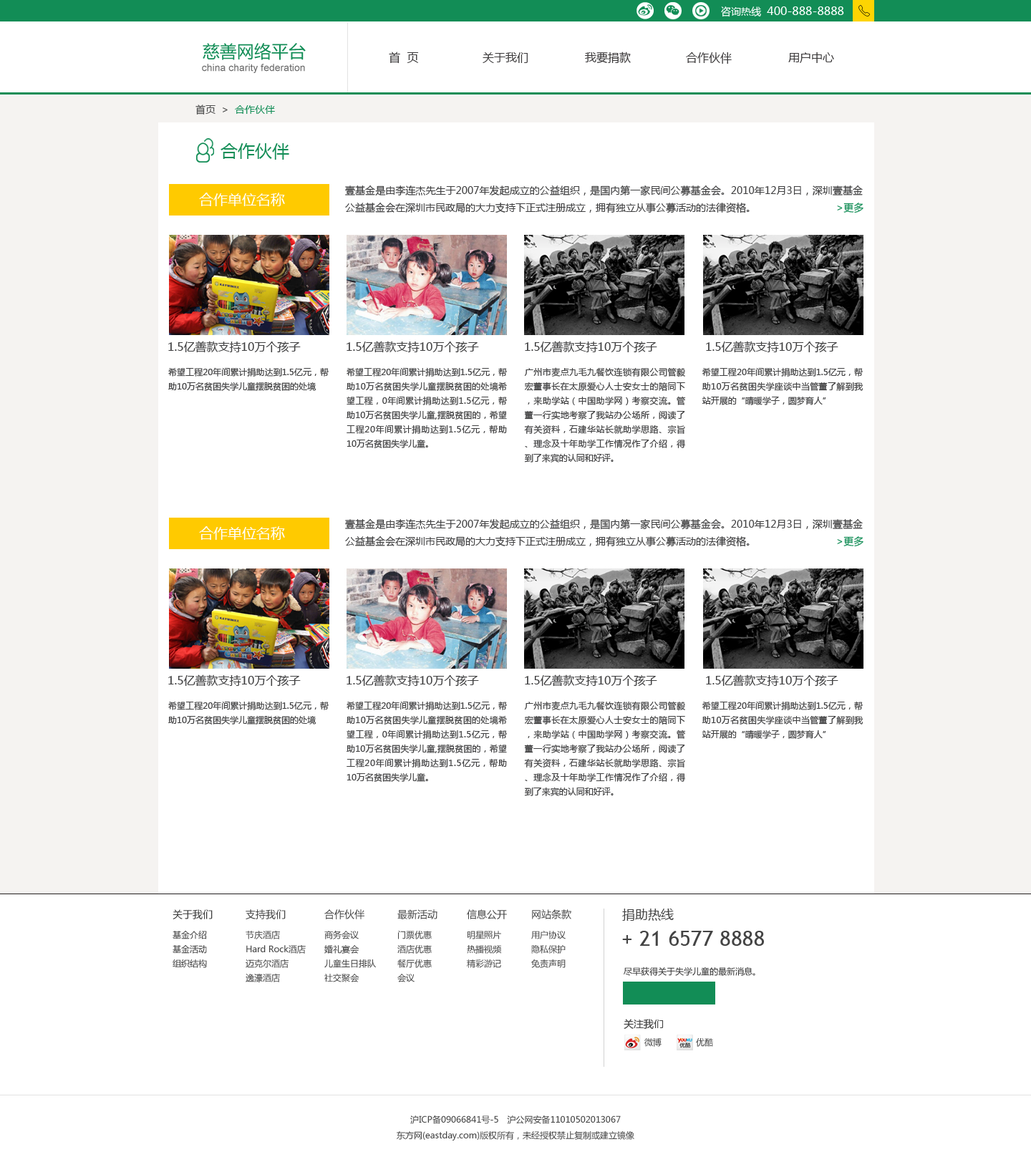
<style>
.page{position:relative;width:1031px;height:1157px;background:#ffffff}
.page>*{position:absolute;margin:0}
.t1{font:11.5px "MicrosoftYaHei";color:#ffffff}
.t2{font:10px "MicrosoftYaHei";color:#ffffff}
.t3{font:17.2px "MicrosoftYaHei";color:#128d56}
.t4{font:11.5px "MicrosoftYaHei";color:#3c3a3b}
.t5{font:10px "ArialMT";color:#6c6c6c}
.t6{font:10px "MicrosoftYaHei";color:#505050}
.t7{font:10px "MicrosoftYaHei";color:#128d56}
.t8{font:10px/17.2px "MicrosoftYaHei";color:#404041}
.t9{font:10px/17.2px "MicrosoftYaHei";color:#128d56}
.t10{font:14.3px "MicrosoftYaHei";color:#ffffff}
.t11{font:11.5px "MicrosoftYaHei";color:#404041}
.t12{font:8.6px/14.3px "MicrosoftYaHei";color:#404041}
.t13{font:8.6px/14.3px "MicrosoftYaHei";color:#3a3a3a}
.t14{font:10px/21.5px "MicrosoftYaHei";color:#3a3a3a}
.t15{font:8.6px/14.3px "MicrosoftYaHei";color:#444444}
.t16{font:10px/21.5px "MicrosoftYaHei";color:#444444}
.t17{font:12.9px "MicrosoftYaHei";color:#444444}
.t18{font:21.5px "TrebuchetMS";color:#444444}
.t19{font:8.6px "MicrosoftYaHei";color:#323232}
.t20{font:10px "MicrosoftYaHei";color:#444444}
.t21{font:8.6px "MicrosoftYaHei";color:#444444}
.t22{font:8.6px/15.7px "MicrosoftYaHei";color:#444444}
</style>
<div class="page">
<p class="t1" style="left:721px;top:6px;width:123px;height:11px"><span class="t2">咨询热线  </span>400-888-8888</p>
<p class="t3" style="left:203px;top:43px;width:103px;height:17px">慈善网络平台</p>
<p class="t4" style="left:389px;top:52px;width:30px;height:12px">首  页</p>
<p class="t4" style="left:482px;top:52px;width:46px;height:11px">关于我们</p>
<p class="t4" style="left:585px;top:52px;width:46px;height:11px">我要捐款</p>
<p class="t4" style="left:686px;top:52px;width:46px;height:12px">合作伙伴</p>
<p class="t4" style="left:788px;top:52px;width:46px;height:11px">用户中心</p>
<p class="t5" style="left:202px;top:64px;width:103px;height:9px">china charity federation</p>
<p class="t6" style="left:195px;top:105px;width:80px;height:10px">首页  &gt;  <span class="t7">合作伙伴</span></p>
<p class="t3" style="left:220px;top:143px;width:69px;height:17px">合作伙伴</p>
<p class="t8" style="left:345px;top:185px;width:518px;height:28px;text-align:justify">壹基金是由李连杰先生于2007年发起成立的公益组织，是国内第一家民间公募基金会。2010年12月3日，深圳壹基金公益基金会在深圳市民政局的大力支持下正式注册成立，拥有独立从事公募活动的法律资格。                           <span class="t9">&gt;更多</span></p>
<p class="t10" style="left:199px;top:193px;width:86px;height:13px">合作单位名称</p>
<p class="t11" style="left:168px;top:341px;width:133px;height:12px">1.5亿善款支持10万个孩子</p>
<p class="t11" style="left:346px;top:341px;width:133px;height:12px">1.5亿善款支持10万个孩子</p>
<p class="t11" style="left:525px;top:341px;width:132px;height:12px">1.5亿善款支持10万个孩子</p>
<p class="t11" style="left:706px;top:341px;width:132px;height:12px">1.5亿善款支持10万个孩子</p>
<p class="t12" style="left:168px;top:367px;width:161px;height:24px;text-align:justify">希望工程20年间累计捐助达到1.5亿元，帮助10万名贫困失学儿童摆脱贫困的处境</p>
<p class="t12" style="left:346px;top:367px;width:161px;height:81px;text-align:justify">希望工程20年间累计捐助达到1.5亿元，帮助10万名贫困失学儿童摆脱贫困的处境希望工程，0年间累计捐助达到1.5亿元，帮助10万名贫困失学儿童,摆脱贫困的，希望工程20年间累计捐助达到1.5亿元，帮助10万名贫困失学儿童。</p>
<p class="t12" style="left:524px;top:367px;width:162px;height:95px;text-align:justify">广州市麦点九毛九餐饮连锁有限公司管毅宏董事长在太原爱心人士安女士的陪同下，来助学站（中国助学网）考察交流。管董一行实地考察了我站办公场所，阅读了有关资料，石建华站长就助学思路、宗旨、理念及十年助学工作情况作了介绍，得到了来宾的认同和好评。</p>
<p class="t12" style="left:702px;top:367px;width:161px;height:38px;text-align:justify">希望工程20年间累计捐助达到1.5亿元，帮助10万名贫困失学座谈中当管董了解到我站开展的“晴暖学子，圆梦育人”</p>
<p class="t8" style="left:345px;top:519px;width:518px;height:28px;text-align:justify">壹基金是由李连杰先生于2007年发起成立的公益组织，是国内第一家民间公募基金会。2010年12月3日，深圳壹基金公益基金会在深圳市民政局的大力支持下正式注册成立，拥有独立从事公募活动的法律资格。                           <span class="t9">&gt;更多</span></p>
<p class="t10" style="left:199px;top:526px;width:86px;height:14px">合作单位名称</p>
<p class="t11" style="left:168px;top:674px;width:133px;height:12px">1.5亿善款支持10万个孩子</p>
<p class="t11" style="left:346px;top:674px;width:133px;height:12px">1.5亿善款支持10万个孩子</p>
<p class="t11" style="left:525px;top:674px;width:132px;height:12px">1.5亿善款支持10万个孩子</p>
<p class="t11" style="left:706px;top:674px;width:132px;height:12px">1.5亿善款支持10万个孩子</p>
<p class="t12" style="left:168px;top:701px;width:161px;height:23px;text-align:justify">希望工程20年间累计捐助达到1.5亿元，帮助10万名贫困失学儿童摆脱贫困的处境</p>
<p class="t12" style="left:346px;top:701px;width:161px;height:81px;text-align:justify">希望工程20年间累计捐助达到1.5亿元，帮助10万名贫困失学儿童摆脱贫困的处境希望工程，0年间累计捐助达到1.5亿元，帮助10万名贫困失学儿童,摆脱贫困的，希望工程20年间累计捐助达到1.5亿元，帮助10万名贫困失学儿童。</p>
<p class="t12" style="left:524px;top:701px;width:162px;height:95px;text-align:justify">广州市麦点九毛九餐饮连锁有限公司管毅宏董事长在太原爱心人士安女士的陪同下，来助学站（中国助学网）考察交流。管董一行实地考察了我站办公场所，阅读了有关资料，石建华站长就助学思路、宗旨、理念及十年助学工作情况作了介绍，得到了来宾的认同和好评。</p>
<p class="t12" style="left:702px;top:701px;width:161px;height:38px;text-align:justify">希望工程20年间累计捐助达到1.5亿元，帮助10万名贫困失学座谈中当管董了解到我站开展的“晴暖学子，圆梦育人”</p>
<p class="t13" style="left:173px;top:909px;width:40px;height:59px"><span class="t14">关于我们 <br></span>基金介绍<br>基金活动<br>组织结构</p>
<p class="t15" style="left:246px;top:909px;width:60px;height:73px"><span class="t16">支持我们<br></span>节庆酒店<br>Hard Rock酒店<br>迈克尔酒店<br>逸濠酒店</p>
<p class="t15" style="left:324px;top:909px;width:52px;height:73px"><span class="t16">合作伙伴<br></span>商务会议<br>婚礼宴会<br>儿童生日排队<br>社交聚会</p>
<p class="t15" style="left:397px;top:909px;width:40px;height:73px"><span class="t16">最新活动<br></span>门票优惠<br>酒店优惠<br>餐厅优惠<br>会议</p>
<p class="t15" style="left:467px;top:909px;width:40px;height:59px"><span class="t16">信息公开<br></span>明星照片<br>热播视频<br>精彩游记</p>
<p class="t15" style="left:531px;top:909px;width:40px;height:59px"><span class="t16">网站条款<br></span>用户协议<br>隐私保护<br>免责声明</p>
<p class="t17" style="left:622px;top:908px;width:52px;height:13px">捐助热线</p>
<p class="t18" style="left:622px;top:931px;width:142px;height:15px">+ 21 6577 8888</p>
<p class="t19" style="left:623px;top:966px;width:132px;height:10px">尽早获得关于失学儿童的最新消息。</p>
<p class="t20" style="left:623px;top:1019px;width:41px;height:10px">关注我们</p>
<p class="t21" style="left:644px;top:1038px;width:17px;height:9px">微博</p>
<p class="t21" style="left:696px;top:1038px;width:17px;height:9px">优酷</p>
<p class="t22" style="left:397px;top:1115px;width:237px;height:25px;text-align:center">沪ICP备09066841号-5　沪公网安备11010502013067<br>东方网(eastday.com)版权所有，未经授权禁止复制或建立镜像</p>
</div>
